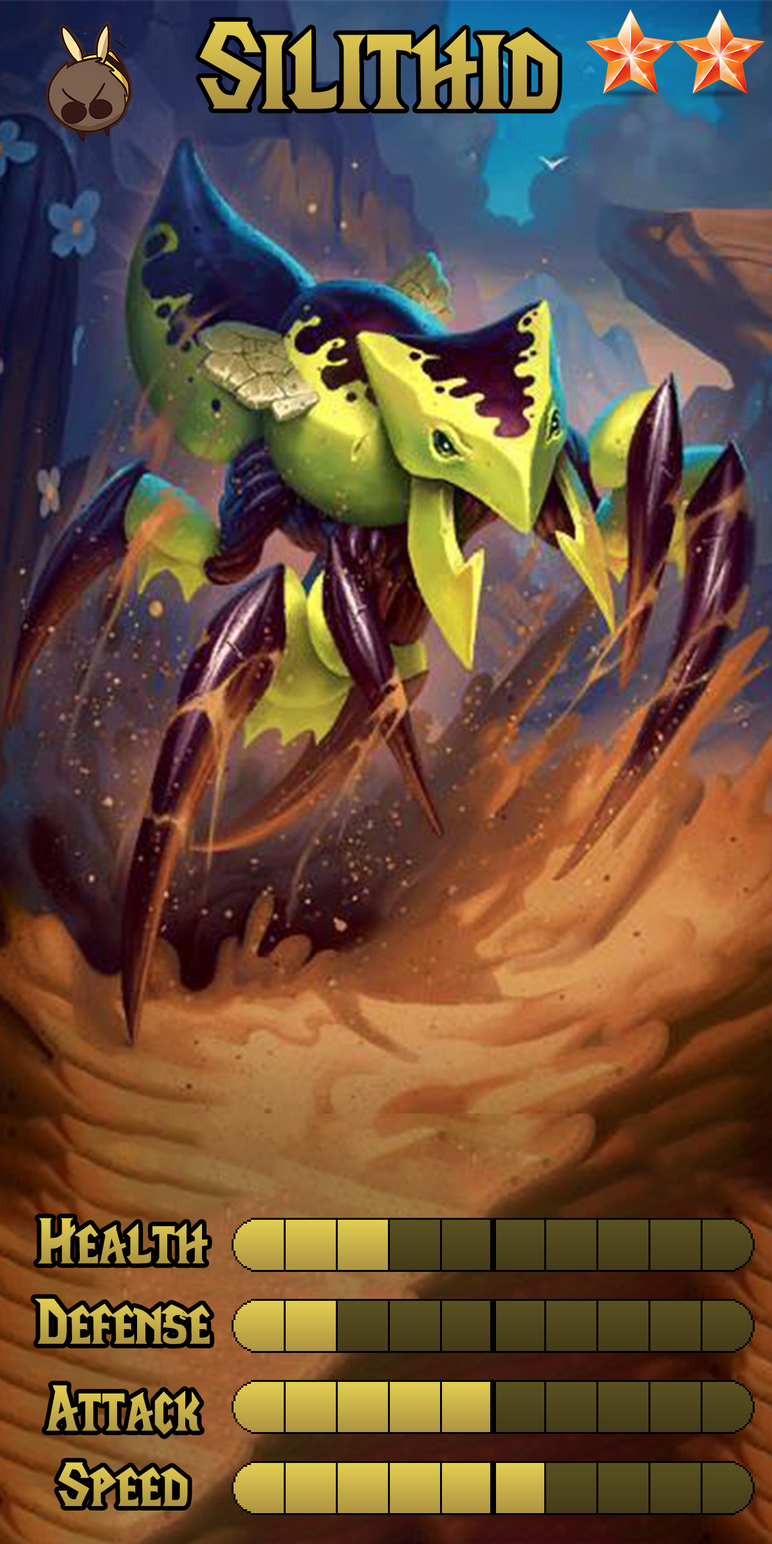
<style>
.page{position:relative;width:772px;height:1544px}
.page>*{position:absolute;margin:0}
.t1{font:128.7px "LifeCraft";color:#c4ac48}
.t2{font:64.3px "LifeCraft";color:#c3ab48}
.t3{font:64.3px "LifeCraft";color:#c5ad48}
.t4{font:64.3px "LifeCraft";color:#c6af49}
.t5{font:64.3px "LifeCraft";color:#c5ae49}
</style>
<div class="page">
<p class="t1" style="left:199px;top:21px;width:359px;height:88px">Silithid</p>
<p class="t2" style="left:37px;top:1218px;width:171px;height:46px">Health</p>
<p class="t3" style="left:35px;top:1298px;width:175px;height:47px">Defense</p>
<p class="t4" style="left:46px;top:1385px;width:155px;height:50px">Attack</p>
<p class="t5" style="left:58px;top:1463px;width:130px;height:43px">Speed</p>
</div>
